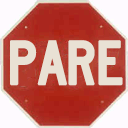
<style>
.page{position:relative;width:128px;height:128px}
.page>*{position:absolute;margin:0}
.t1{font:64px "HighwayGothicNarrow";letter-spacing:-0.04em;color:#e9e1d4;font-weight:bold}
</style>
<div class="page">
<p class="t1" style="left:10px;top:40px;width:113px;height:46px">PARE</p>
</div>
